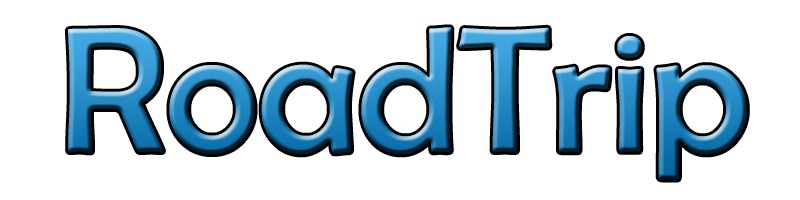
<style>
.page{position:relative;width:800px;height:200px;background:#ffffff}
.page>*{position:absolute;margin:0}
.t1{font:180px "BerlinSansFB-Reg"}
</style>
<div class="page">
<p class="t1" style="left:67px;top:27px;width:680px;height:153px">RoadTrip</p>
</div>
